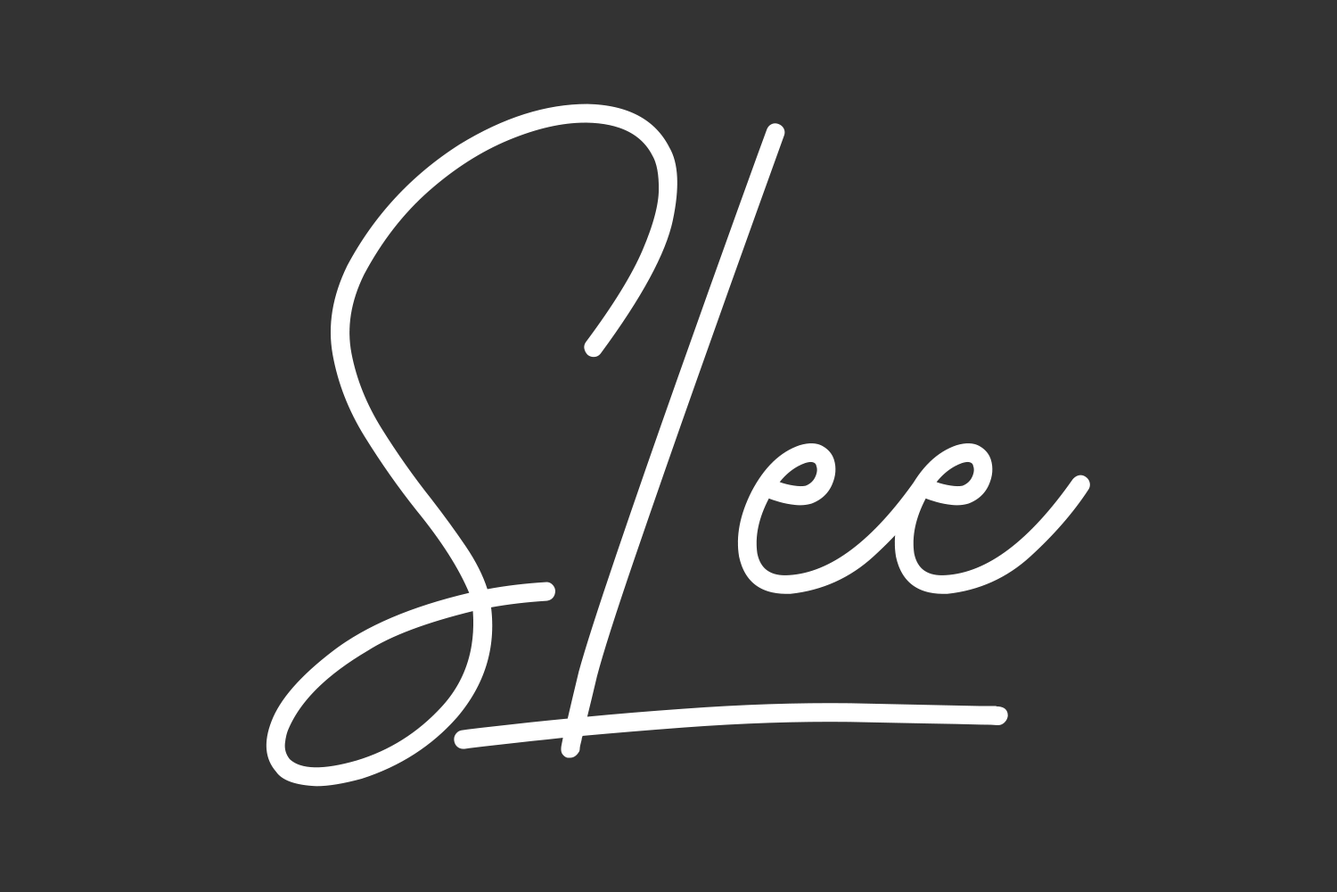
<style>
.page{position:relative;width:1337px;height:892px;background:#333333}
.page>*{position:absolute;margin:0}
.t1{font:953.1px "BetterGrade";letter-spacing:-0.2em;color:#ffffff}
.t2{font:953.1px "BetterGrade";color:#ffffff}
</style>
<div class="page">
<p class="t1" style="left:266px;top:103px;width:824px;height:683px">SL<span class="t2">ee</span></p>
</div>
